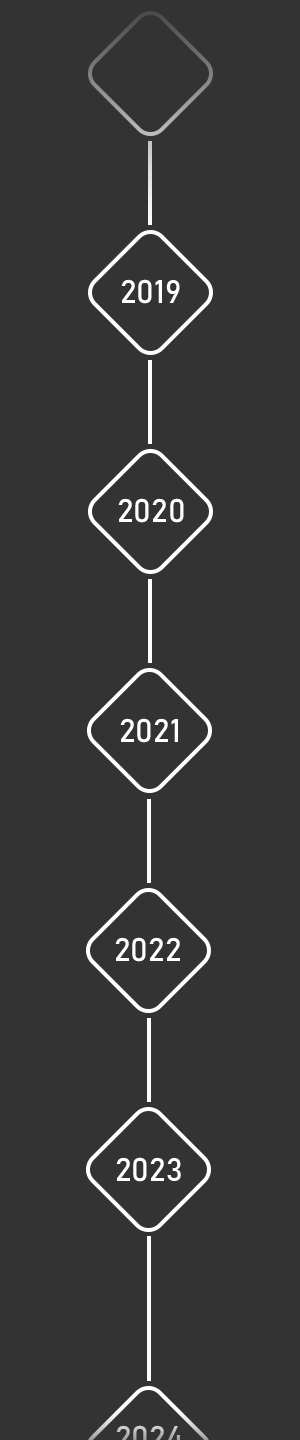
<style>
.page{position:relative;width:300px;height:1440px;background:#333333}
.page>*{position:absolute;margin:0}
.t1{font:32.1px "Bahnschrift";color:#ffffff}
</style>
<div class="page">
<p class="t1" style="left:121px;top:279px;width:59px;height:25px">2019</p>
<p class="t1" style="left:118px;top:498px;width:66px;height:25px">2020</p>
<p class="t1" style="left:120px;top:718px;width:58px;height:25px">2021</p>
<p class="t1" style="left:115px;top:937px;width:65px;height:25px">2022</p>
<p class="t1" style="left:116px;top:1157px;width:65px;height:25px">2023</p>
</div>
